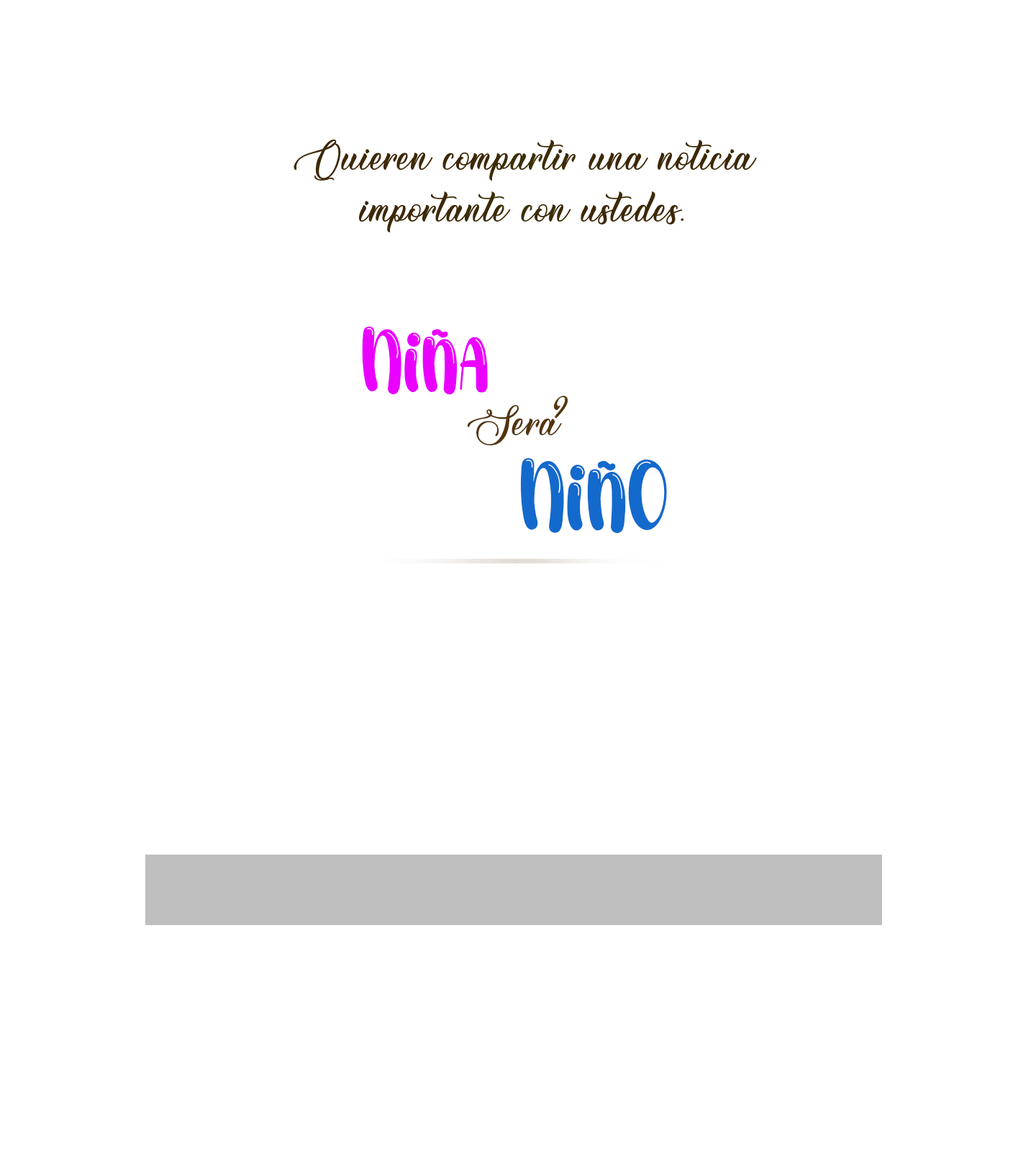
<style>
.page{position:relative;width:1036px;height:1151px;background:#ffffff}
.page>*{position:absolute;margin:0}
.t1{font:43.2px "BettyMollyPersonalUse";color:#3d2807}
.t2{font:89.9px "BubbleShineRegular";color:#ea00ff}
.t3{font:43.2px "BettyMollyPersonalUse";color:#54340c}
.t4{font:99.3px "BubbleShineRegular";color:#136acc}
</style>
<div class="page">
<p class="t1" style="left:294px;top:140px;width:463px;height:92px;text-align:center">Quieren compartir una noticia importante con ustedes.</p>
<p class="t2" style="left:362px;top:327px;width:126px;height:68px">Niña</p>
<p class="t3" style="left:467px;top:405px;width:95px;height:40px">Sera</p>
<p class="t4" style="left:520px;top:458px;width:147px;height:75px">NiñO</p>
</div>
